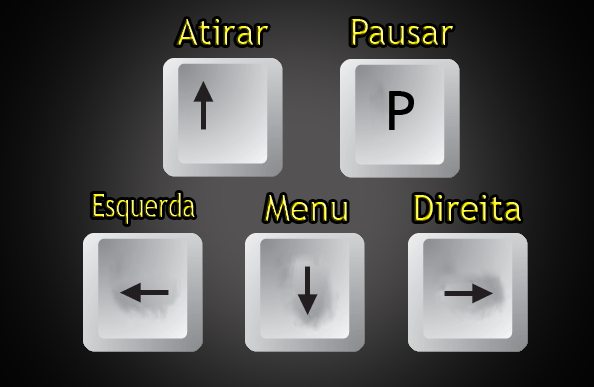
<style>
.page{position:relative;width:594px;height:387px}
.page>*{position:absolute;margin:0}
.t1{font:36px "TrebuchetMS"}
.t2{font:32.1px "TrebuchetMS";scale:0.8 1}
</style>
<div class="page">
<p class="t1" style="left:176px;top:19px;width:92px;height:26px">Atirar</p>
<p class="t1" style="left:351px;top:19px;width:102px;height:26px">Pausar</p>
<p class="t2" style="left:92px;top:193px;width:103px;height:31px">Esquerda</p>
<p class="t1" style="left:264px;top:195px;width:83px;height:26px">Menu</p>
<p class="t1" style="left:414px;top:195px;width:107px;height:26px">Direita</p>
</div>
